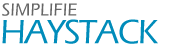
<style>
.page{position:relative;width:172px;height:45px;background:#ffffff}
.page>*{position:absolute;margin:0}
.t1{font:18px "ErasITC-Medium";color:#666666}
.t2{font:35px "ErasITC-Medium";letter-spacing:-0.05em;color:#008cba}
</style>
<div class="page">
<p class="t1" style="left:2px;top:3px;width:75px;height:13px">SIMPLIFIE</p>
<p class="t2" style="left:2px;top:19px;width:156px;height:25px">HAYSTACK</p>
</div>
